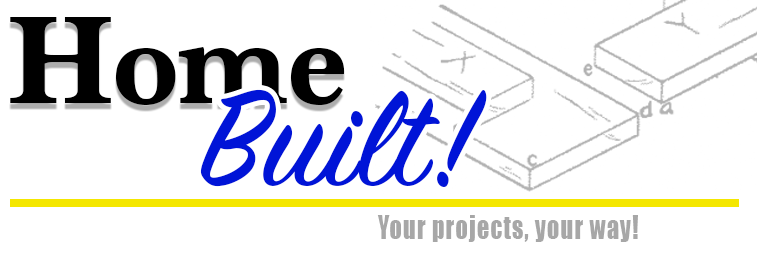
<style>
.page{position:relative;width:757px;height:254px;background:#ffffff}
.page>*{position:absolute;margin:0}
.t1{font:130px "Marion-Bold";letter-spacing:-0.025em;color:#000000}
.t2{font:150px "SignPainter-HouseScript";letter-spacing:0.01em;color:#0014d7}
.t3{font:30px "Impact";letter-spacing:0.05em;color:#a7a7a7;scale:0.8 1}
</style>
<div class="page">
<p class="t1" style="left:10px;top:17px;width:335px;height:88px">Home</p>
<p class="t2" style="left:200px;top:89px;width:287px;height:98px">Built!</p>
<p class="t3" style="left:377px;top:215px;width:261px;height:27px">Your projects, your way!</p>
</div>
